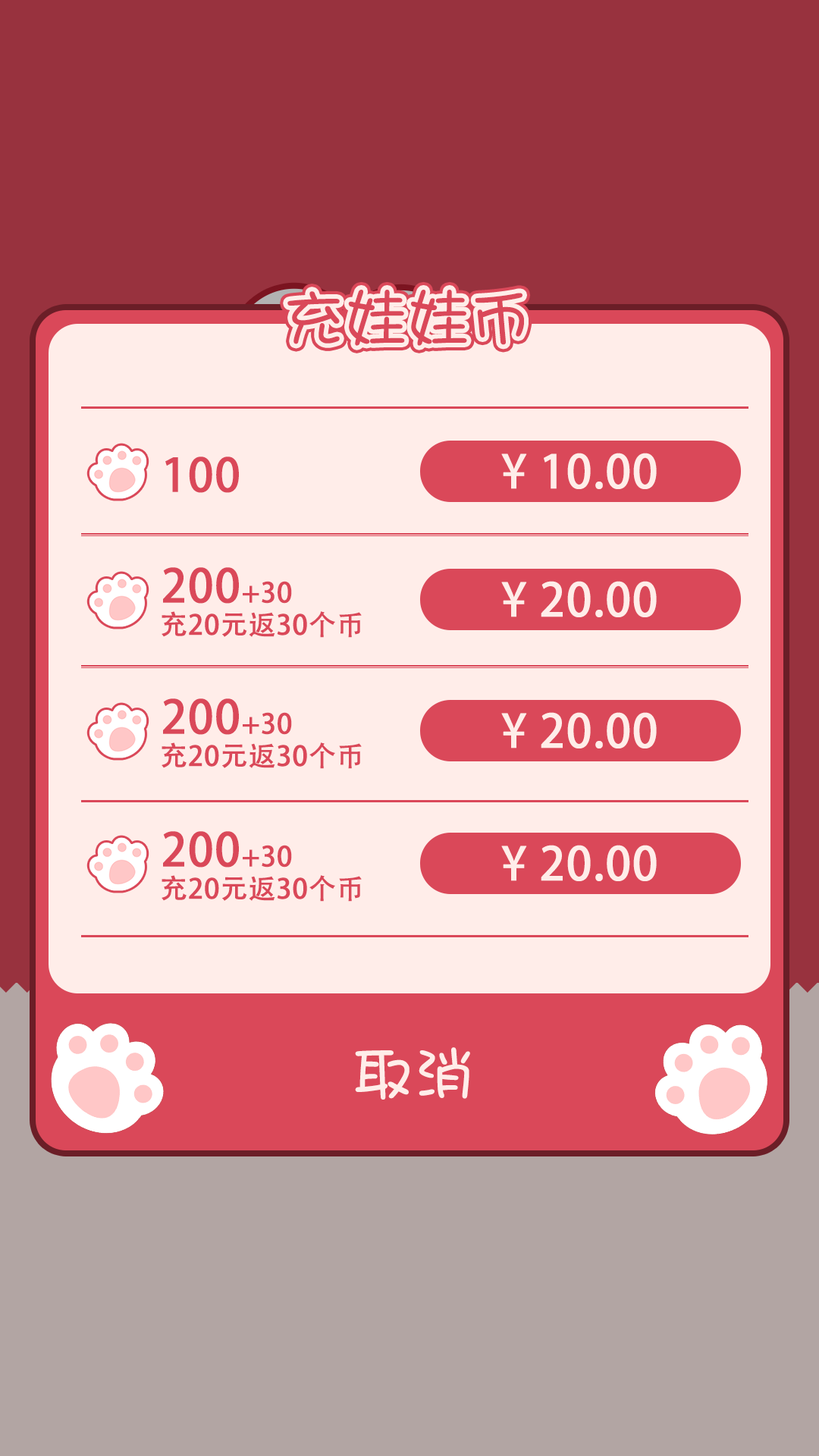
<style>
.page{position:relative;width:819px;height:1456px;background:#ffede9}
.page>*{position:absolute;margin:0}
.t1{font:60.7px "DFShaoNvW5";color:#da4859;font-weight:bold}
.t2{font:45.5px "AdobeHeitiStd-Regular";color:#da4859;font-weight:bold}
.t3{font:45.5px "AdobeHeitiStd-Regular";color:#ffede9;font-weight:bold}
.t4{font:27.3px "AdobeHeitiStd-Regular";color:#da4859;font-weight:bold}
.t5{font:60.7px "DFShaoNvW5";color:#ffede9;font-weight:bold}
</style>
<div class="page">
<p class="t1" style="left:287px;top:290px;width:237px;height:56px">充娃娃币</p>
<p class="t2" style="left:165px;top:457px;width:74px;height:36px">100</p>
<p class="t3" style="left:501px;top:453px;width:156px;height:36px">¥ 10.00</p>
<p class="t2" style="left:163px;top:567px;width:129px;height:37px">200<span class="t4">+30</span></p>
<p class="t3" style="left:501px;top:581px;width:156px;height:36px">¥ 20.00</p>
<p class="t4" style="left:162px;top:611px;width:200px;height:27px">充20元返30个币</p>
<p class="t2" style="left:163px;top:698px;width:129px;height:37px">200<span class="t4">+30</span></p>
<p class="t3" style="left:501px;top:712px;width:156px;height:36px">¥ 20.00</p>
<p class="t4" style="left:162px;top:742px;width:200px;height:27px">充20元返30个币</p>
<p class="t2" style="left:163px;top:831px;width:129px;height:37px">200<span class="t4">+30</span></p>
<p class="t3" style="left:501px;top:845px;width:156px;height:36px">¥ 20.00</p>
<p class="t4" style="left:162px;top:875px;width:200px;height:27px">充20元返30个币</p>
<p class="t5" style="left:355px;top:1047px;width:115px;height:53px">取消</p>
</div>
